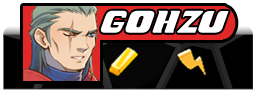
<style>
.page{position:relative;width:256px;height:92px;background:#000000}
.page>*{position:absolute;margin:0}
.t1{font:24px "-Xenogears";letter-spacing:0.05em;color:#ffffff}
</style>
<div class="page">
<p class="t1" style="left:100px;top:10px;width:129px;height:23px">GOHZU</p>
</div>
